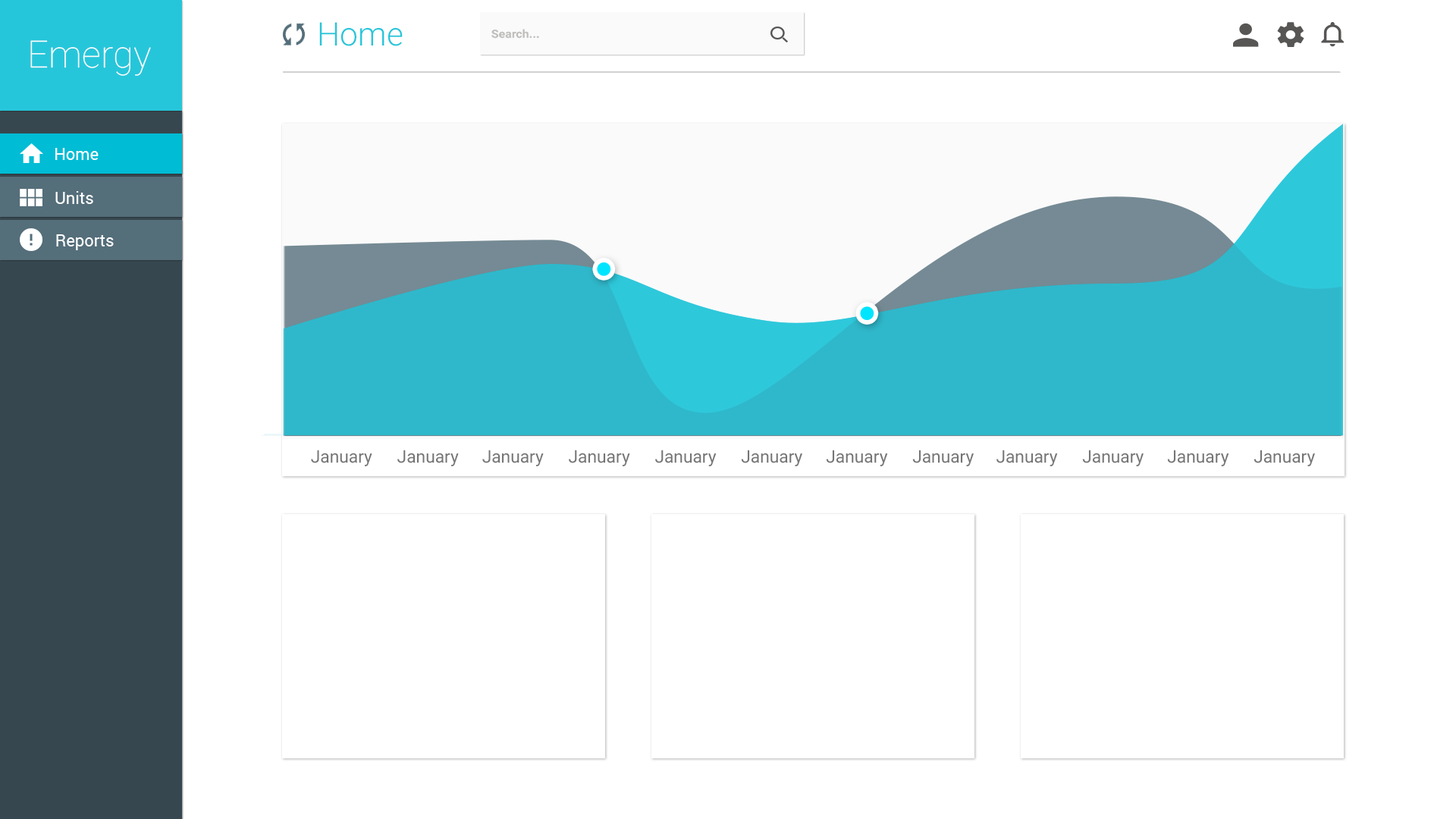
<style>
.page{position:relative;width:1456px;height:819px;background:#ffffff}
.page>*{position:absolute;margin:0}
.t1{font:32.6px "Roboto-Light";color:#26c6da}
.t2{font:11.2px "Roboto-Bold";color:#bcbbb9;scale:1.08 1}
.t3{font:37.6px "Roboto-Thin";color:#ffffff}
.t4{font:16.7px "Roboto-Regular";color:#ffffff}
.t5{font:17.3px "Roboto-Regular";color:#757575}
</style>
<div class="page">
<p class="t1" style="left:319px;top:22px;width:84px;height:24px">Home</p>
<p class="t2" style="left:491px;top:29px;width:48px;height:10px">Search...</p>
<p class="t3" style="left:30px;top:40px;width:121px;height:36px">Emergy</p>
<p class="t4" style="left:55px;top:148px;width:44px;height:12px">Home</p>
<p class="t4" style="left:55px;top:191px;width:38px;height:13px">Units</p>
<p class="t4" style="left:56px;top:234px;width:58px;height:16px">Reports</p>
<p class="t5" style="left:311px;top:450px;width:61px;height:16px">January</p>
<p class="t5" style="left:397px;top:450px;width:62px;height:16px">January</p>
<p class="t5" style="left:482px;top:450px;width:62px;height:16px">January</p>
<p class="t5" style="left:569px;top:450px;width:61px;height:16px">January</p>
<p class="t5" style="left:655px;top:450px;width:62px;height:16px">January</p>
<p class="t5" style="left:741px;top:450px;width:61px;height:16px">January</p>
<p class="t5" style="left:826px;top:450px;width:62px;height:16px">January</p>
<p class="t5" style="left:912px;top:450px;width:62px;height:16px">January</p>
<p class="t5" style="left:996px;top:450px;width:62px;height:16px">January</p>
<p class="t5" style="left:1082px;top:450px;width:62px;height:16px">January</p>
<p class="t5" style="left:1167px;top:450px;width:62px;height:16px">January</p>
<p class="t5" style="left:1254px;top:450px;width:61px;height:16px">January</p>
</div>
